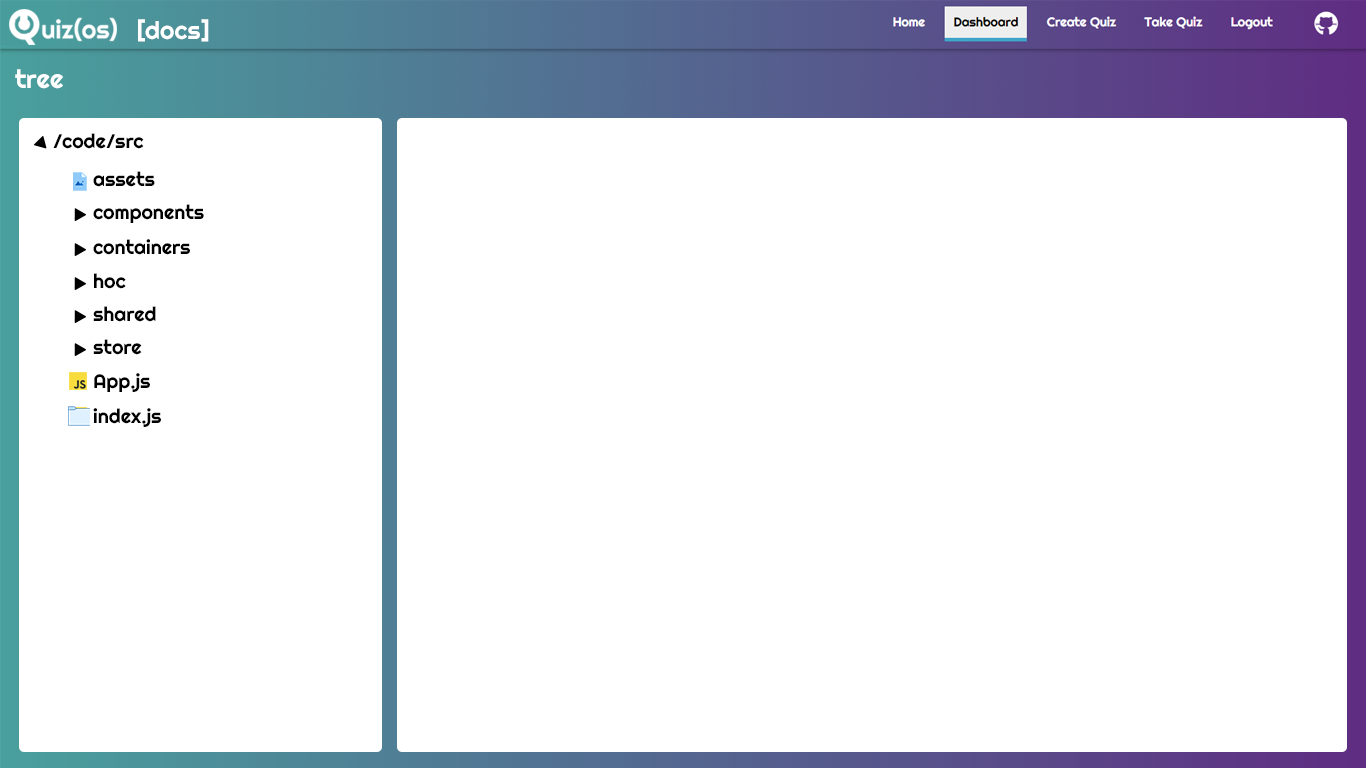
<style>
.page{position:relative;width:1366px;height:768px;background:#ffffff}
.page>*{position:absolute;margin:0}
.t1{font:24.7px "Righteous-Regular";color:#ffffff}
.t2{font:25.7px "Righteous-Regular";color:#ffffff}
.t3{font:19.7px "Righteous-Regular";color:#000000}
</style>
<div class="page">
<p class="t1" style="left:138px;top:19px;width:71px;height:23px">[docs]</p>
<p class="t2" style="left:15px;top:69px;width:48px;height:20px">tree</p>
<p class="t3" style="left:53px;top:133px;width:91px;height:16px">/code/src</p>
<p class="t3" style="left:93px;top:171px;width:62px;height:16px">assets</p>
<p class="t3" style="left:93px;top:204px;width:111px;height:19px">components</p>
<p class="t3" style="left:93px;top:239px;width:97px;height:16px">containers</p>
<p class="t3" style="left:94px;top:273px;width:32px;height:16px">hoc</p>
<p class="t3" style="left:93px;top:306px;width:63px;height:16px">shared</p>
<p class="t3" style="left:93px;top:339px;width:49px;height:16px">store</p>
<p class="t3" style="left:94px;top:373px;width:56px;height:19px">App.js</p>
<p class="t3" style="left:93px;top:408px;width:68px;height:19px">index.js</p>
</div>
